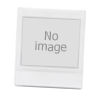
<style>
.page{position:relative;width:100px;height:100px;background:#ffffff}
.page>*{position:absolute;margin:0}
.t1{font:12px/11px "Tahoma";color:#989898}
</style>
<div class="page">
<p class="t1" style="left:35px;top:31px;width:32px;height:23px;text-align:center;rotate:2deg">No<br>image</p>
</div>
